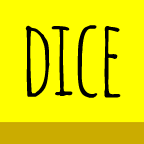
<style>
.page{position:relative;width:144px;height:144px;background:#ffff00}
.page>*{position:absolute;margin:0}
.t1{font:106.1px "AmaticSC-Regular";letter-spacing:-0.06em;color:#000000}
.t2{font:106.1px "AmaticSC-Regular";letter-spacing:-0.04em;color:#000000}
.t3{font:106.1px "AmaticSC-Regular";letter-spacing:-0.02em;color:#000000}
.t4{font:106.1px "AmaticSC-Regular";color:#000000}
</style>
<div class="page">
<p class="t1" style="left:25px;top:25px;width:96px;height:73px">d<span class="t2">i</span><span class="t3">c</span><span class="t4">e</span></p>
</div>
